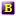
<style>
.page{position:relative;width:16px;height:16px;background:#ffffff}
.page>*{position:absolute;margin:0}
.t1{font:12px "BodoniBT-Bold";color:#ffff00}
</style>
<div class="page">
<p class="t1" style="left:4px;top:4px;width:8px;height:8px">B</p>
</div>
